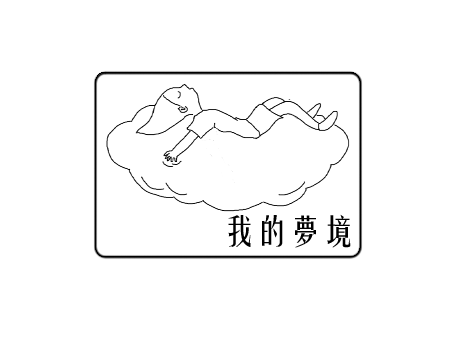
<style>
.page{position:relative;width:450px;height:350px;background:#ffffff}
.page>*{position:absolute;margin:0}
.t1{font:33.3px "FZYTK--GBK1-0";color:#000000}
</style>
<div class="page">
<p class="t1" style="left:228px;top:214px;width:123px;height:34px">我的夢境</p>
</div>
